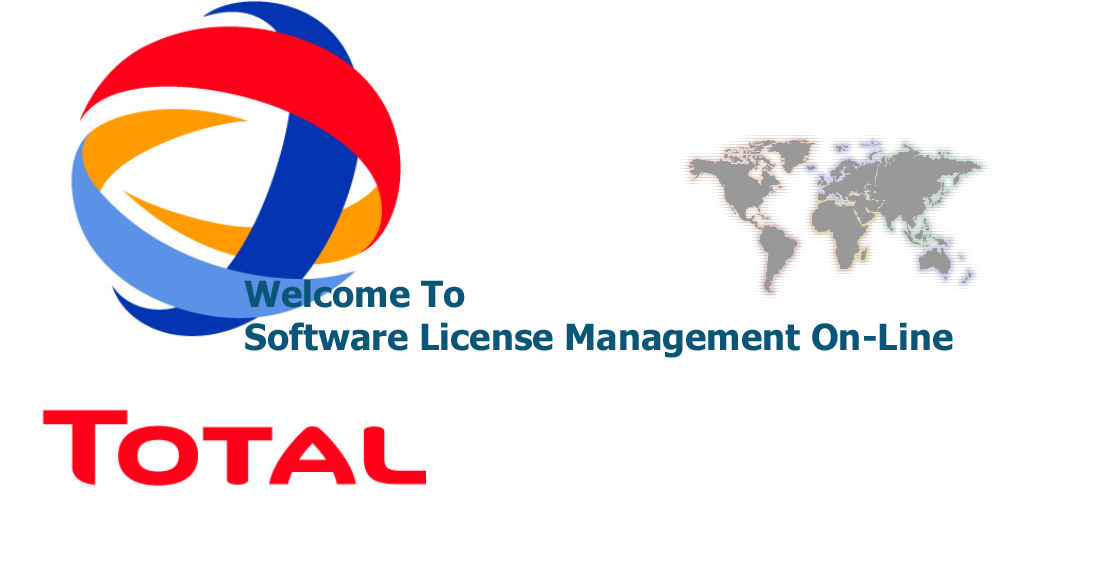
<style>
.page{position:relative;width:1103px;height:564px;background:#ffffff}
.page>*{position:absolute;margin:0}
.t1{font:36px "Tahoma-Bold";color:#0a5578}
</style>
<div class="page">
<p class="t1" style="left:244px;top:279px;width:763px;height:120px">Welcome To <br>Software License Management On-Line</p>
</div>
